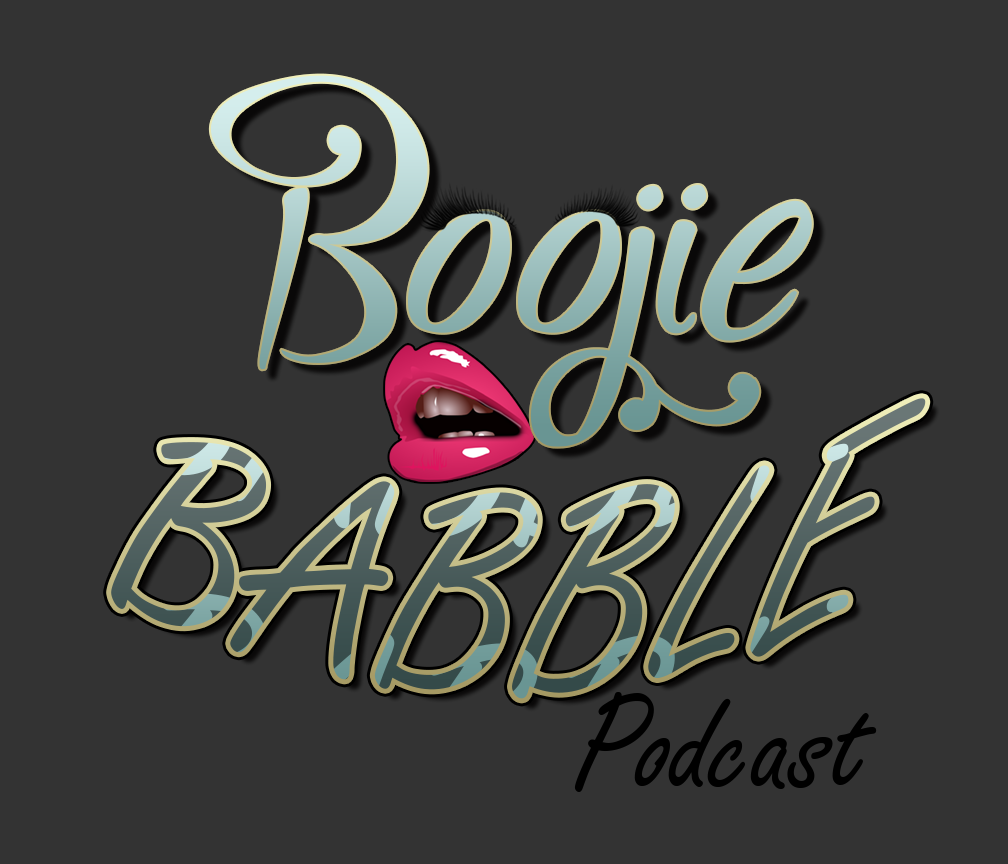
<style>
.page{position:relative;width:1008px;height:864px;background:#333333}
.page>*{position:absolute;margin:0}
.t1{font:300px "Gaby-Demo"}
.t2{font:300px "FreestyleScript-Regular"}
.t3{font:150px "FreestyleScript-Regular";color:#000000}
</style>
<div class="page">
<p class="t1" style="left:210px;top:75px;width:602px;height:372px">Boojie</p>
<p class="t2" style="left:111px;top:398px;width:815px;height:301px">BABBLE</p>
<p class="t3" style="left:574px;top:692px;width:303px;height:100px">Podcast</p>
</div>
